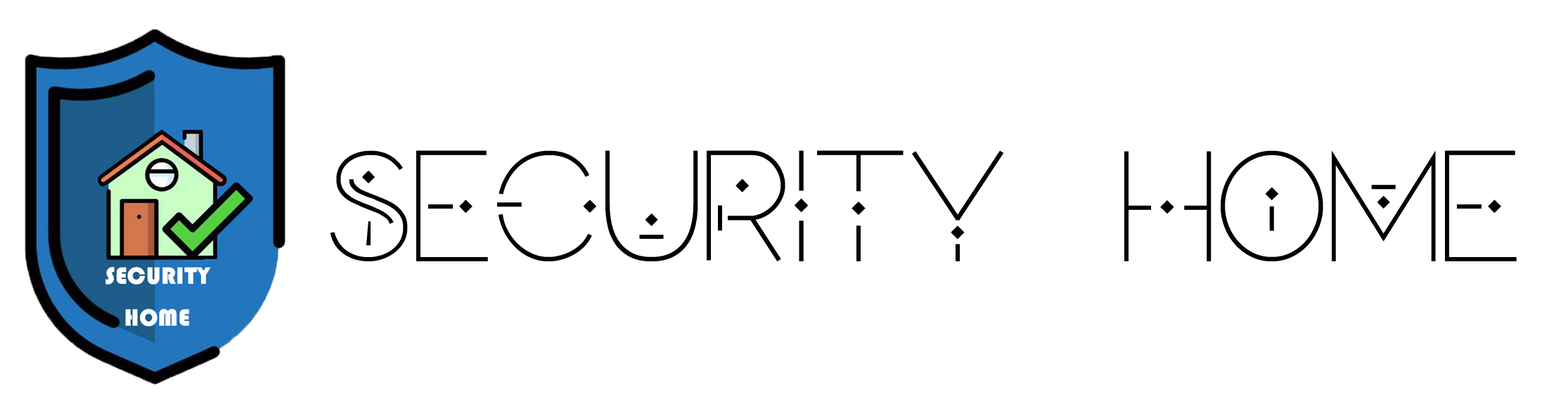
<style>
.page{position:relative;width:1568px;height:413px;background:#ffffff}
.page>*{position:absolute;margin:0}
.t1{font:219.4px "Hades";letter-spacing:0.01em;color:#000000;font-variant:small-caps}
</style>
<div class="page">
<p class="t1" style="left:330px;top:150px;width:1187px;height:112px">security home</p>
</div>
